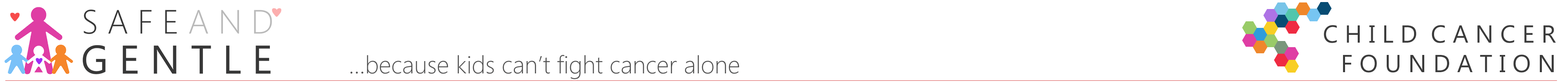
<style>
.page{position:relative;width:1568px;height:82px;background:#ffffff}
.page>*{position:absolute;margin:0}
.t1{font:24.5px "SegoeUI";color:#3b3b3b}
.t2{font:24.5px "SegoeUI-Light";color:#525252}
</style>
<div class="page">
<p class="t1" style="left:1324px;top:25px;width:232px;height:47px;text-align:right">C H I L D  C A N C E R<br>F O U N D A T I O N</p>
<p class="t2" style="left:350px;top:55px;width:389px;height:24px">...because kids can’t fight cancer alone</p>
</div>
